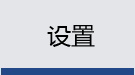
<style>
.page{position:relative;width:135px;height:75px;background:#e3e5e9}
.page>*{position:absolute;margin:0}
.t1{font:24px "MicrosoftYaHei";color:#000000}
</style>
<div class="page">
<p class="t1" style="left:47px;top:25px;width:48px;height:22px">设置</p>
</div>
